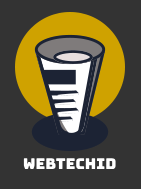
<style>
.page{position:relative;width:141px;height:189px;background:#333333}
.page>*{position:absolute;margin:0}
.t1{font:15px "Bungee-Regular";color:#ffffff}
</style>
<div class="page">
<p class="t1" style="left:23px;top:158px;width:93px;height:11px">WebTechID</p>
</div>
